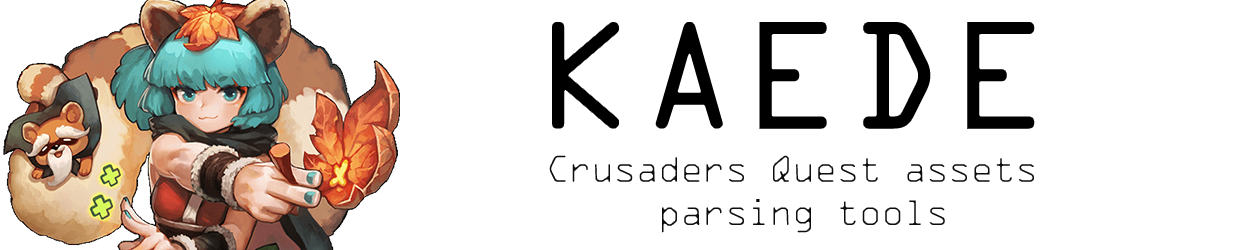
<style>
.page{position:relative;width:1250px;height:250px;background:#ffffff}
.page>*{position:absolute;margin:0}
.t1{font:139.3px "OCRAStd";letter-spacing:0.025em;color:#000000}
.t2{font:36px "OCRAStd";letter-spacing:-0.1em}
</style>
<div class="page">
<p class="t1" style="left:551px;top:21px;width:485px;height:109px">KAEDE</p>
<p class="t2" style="left:548px;top:154px;width:487px;height:80px;text-align:center">Crusaders Quest assets <br>parsing tools</p>
</div>
